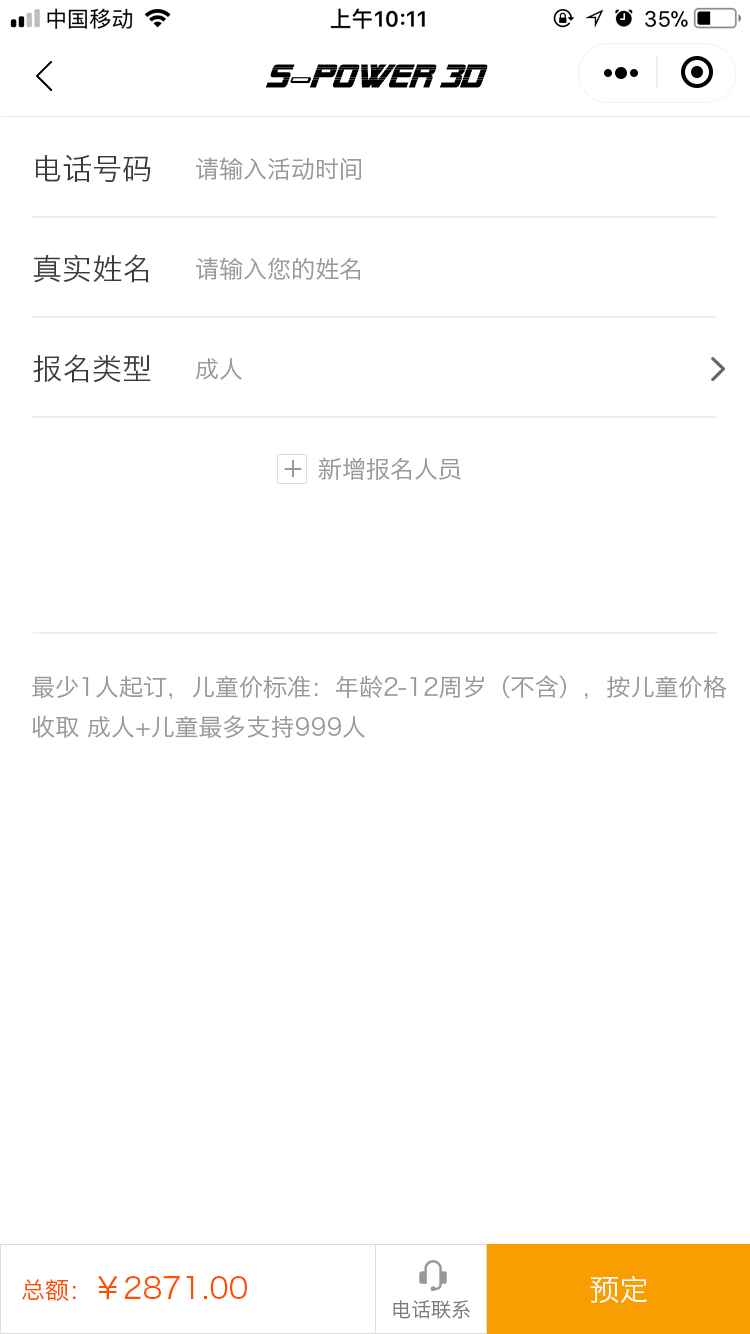
<style>
.page{position:relative;width:750px;height:1334px;background:#ffffff}
.page>*{position:absolute;margin:0}
.t1{font:32px "AlienEncountersItalic";color:#000000;text-transform:uppercase;font-weight:bold}
.t2{font:32px "911Porscha3DItalic";color:#000000;text-transform:uppercase;font-weight:bold}
.t3{font:30px "HiraginoSansGB-W3";color:#3b3b3b;text-transform:uppercase}
.t4{font:24px "HiraginoSansGB-W3";color:#999999;text-transform:uppercase}
.t5{font:30px "HiraginoSansGB-W3";color:#999999;text-transform:uppercase}
.t6{font:24px/40px "HiraginoSansGB-W3";color:#999999;text-transform:uppercase}
.t7{font:30px "HiraginoSansGB-W3";color:#ff4e00;text-transform:uppercase}
.t8{font:24px "HiraginoSansGB-W3";color:#ff4e00;text-transform:uppercase}
.t9{font:30px "HiraginoSansGB-W3";color:#ffffff;text-transform:uppercase}
.t10{font:20px "HiraginoSansGB-W3";color:#7c7c7c;text-transform:uppercase}
</style>
<div class="page">
<p class="t1" style="left:266px;top:64px;width:222px;height:24px">s<span class="t2">-</span>power 3D</p>
<p class="t3" style="left:35px;top:154px;width:116px;height:28px">电话号码</p>
<p class="t4" style="left:196px;top:157px;width:165px;height:23px">请输入活动时间</p>
<p class="t3" style="left:33px;top:254px;width:116px;height:29px">真实姓名</p>
<p class="t4" style="left:196px;top:257px;width:165px;height:23px">请输入您的姓名</p>
<p class="t3" style="left:33px;top:354px;width:118px;height:29px">报名类型</p>
<p class="t4" style="left:195px;top:358px;width:47px;height:22px">成人</p>
<p class="t5" style="left:284px;top:460px;width:18px;height:17px">+</p>
<p class="t4" style="left:318px;top:457px;width:143px;height:23px">新增报名人员</p>
<p class="t6" style="left:32px;top:675px;width:695px;height:64px">最少1人起订，儿童价标准：年龄2-12周岁（不含），按儿童价格<br>收取 成人+儿童最多支持999人</p>
<p class="t7" style="left:22px;top:1275px;width:225px;height:26px"><span class="t8">总额：</span>￥2871.00</p>
<p class="t9" style="left:590px;top:1275px;width:57px;height:28px">预定</p>
<p class="t10" style="left:393px;top:1300px;width:77px;height:19px">电话联系</p>
</div>
